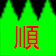
<style>
.page{position:relative;width:56px;height:56px;background:#00ff00}
.page>*{position:absolute;margin:0}
.t1{font:28px "MS-PGothic";color:#ff0000}
</style>
<div class="page">
<p class="t1" style="left:14px;top:25px;width:26px;height:25px">順</p>
</div>
